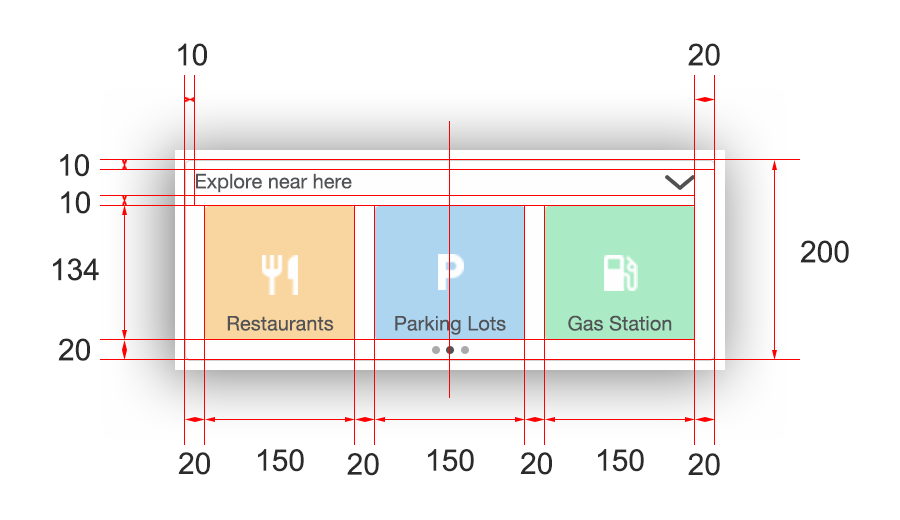
<style>
.page{position:relative;width:900px;height:520px;background:#ffffff}
.page>*{position:absolute;margin:0}
.t1{font:30px "ArialMT";color:#2b2b2b}
</style>
<div class="page">
<p class="t1" style="left:178px;top:43px;width:29px;height:23px">10</p>
<p class="t1" style="left:688px;top:43px;width:32px;height:23px">20</p>
<p class="t1" style="left:60px;top:154px;width:29px;height:23px">10</p>
<p class="t1" style="left:61px;top:191px;width:29px;height:23px">10</p>
<p class="t1" style="left:800px;top:240px;width:49px;height:23px">200</p>
<p class="t1" style="left:53px;top:258px;width:46px;height:23px">134</p>
<p class="t1" style="left:58px;top:338px;width:32px;height:23px">20</p>
<p class="t1" style="left:258px;top:449px;width:46px;height:23px">150</p>
<p class="t1" style="left:428px;top:449px;width:46px;height:23px">150</p>
<p class="t1" style="left:598px;top:449px;width:46px;height:23px">150</p>
<p class="t1" style="left:178px;top:452px;width:32px;height:23px">20</p>
<p class="t1" style="left:347px;top:453px;width:32px;height:23px">20</p>
<p class="t1" style="left:520px;top:452px;width:32px;height:23px">20</p>
<p class="t1" style="left:688px;top:453px;width:32px;height:23px">20</p>
</div>
